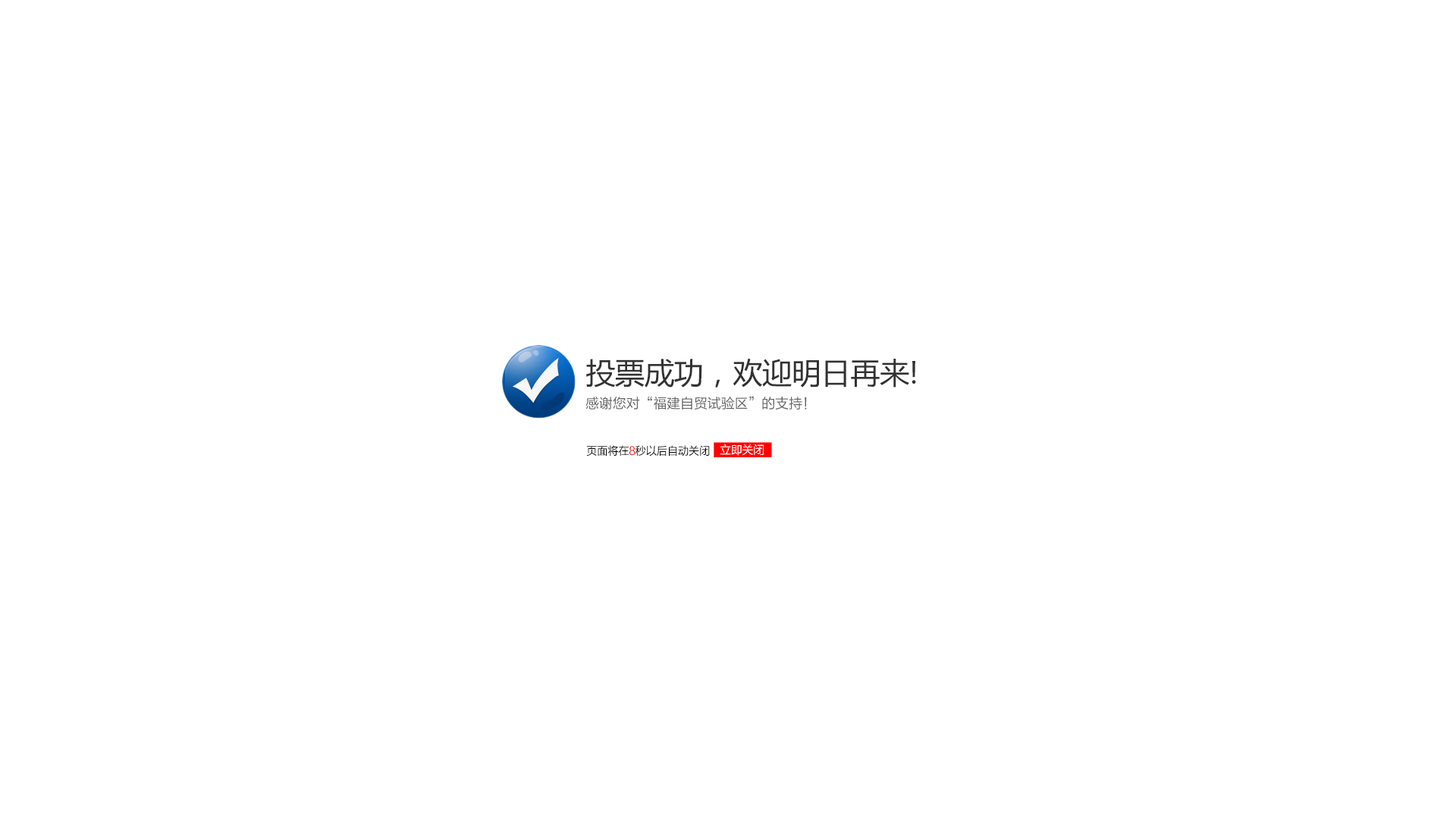
<style>
.page{position:relative;width:1456px;height:819px;background:#ffffff}
.page>*{position:absolute;margin:0}
.t1{font:29.6px "MicrosoftYaHei";letter-spacing:-0.01em;color:#323232}
.t2{font:13.9px "FZLTHK--GBK1-0";letter-spacing:-0.01em;color:#646464}
.t3{font:11.1px "FZLTHK--GBK1-0";letter-spacing:-0.01em;color:#000000;scale:0.97 1}
.t4{font:11.1px "FZLTHK--GBK1-0";letter-spacing:-0.01em;color:#ff0000;scale:0.97 1}
.t5{font:11.1px "MicrosoftYaHei";letter-spacing:-0.01em;color:#ffffff}
</style>
<div class="page">
<p class="t1" style="left:586px;top:358px;width:330px;height:30px">投票成功，欢迎明日再来!</p>
<p class="t2" style="left:585px;top:396px;width:222px;height:14px">感谢您对“福建自贸试验区”的支持！</p>
<p class="t3" style="left:586px;top:445px;width:124px;height:12px">页面将在<span class="t4">8</span>秒以后自动关闭</p>
<p class="t5" style="left:720px;top:444px;width:44px;height:12px">立即关闭</p>
</div>
